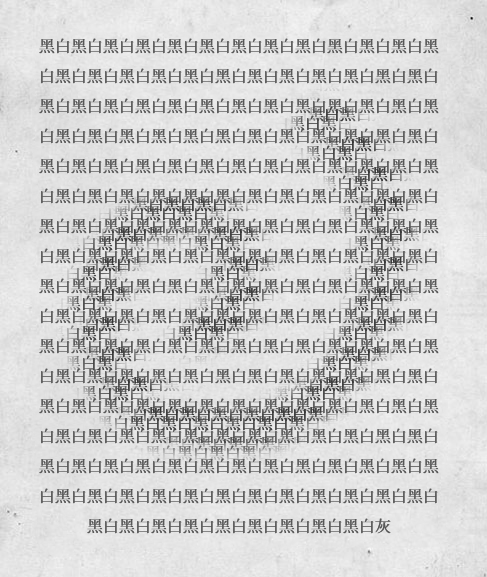
<style>
.page{position:relative;width:487px;height:577px}
.page>*{position:absolute;margin:0}
.t1{font:16px/30px "ContainmentBreach-Regular";color:#575757}
</style>
<div class="page">
<p class="t1" style="left:39px;top:38px;width:400px;height:496px;text-align:center">黑白黑白黑白黑白黑白黑白黑白黑白黑白黑白黑白黑白黑<br>白黑白黑白黑白黑白黑白黑白黑白黑白黑白黑白黑白黑白<br>黑白黑白黑白黑白黑白黑白黑白黑白黑白黑白黑白黑白黑<br>白黑白黑白黑白黑白黑白黑白黑白黑白黑白黑白黑白黑白<br>黑白黑白黑白黑白黑白黑白黑白黑白黑白黑白黑白黑白黑<br>白黑白黑白黑白黑白黑白黑白黑白黑白黑白黑白黑白黑白<br>黑白黑白黑白黑白黑白黑白黑白黑白黑白黑白黑白黑白黑<br>白黑白黑白黑白黑白黑白黑白黑白黑白黑白黑白黑白黑白<br>黑白黑白黑白黑白黑白黑白黑白黑白黑白黑白黑白黑白黑<br>白黑白黑白黑白黑白黑白黑白黑白黑白黑白黑白黑白黑白<br>黑白黑白黑白黑白黑白黑白黑白黑白黑白黑白黑白黑白黑<br>白黑白黑白黑白黑白黑白黑白黑白黑白黑白黑白黑白黑白<br>黑白黑白黑白黑白黑白黑白黑白黑白黑白黑白黑白黑白黑<br>白黑白黑白黑白黑白黑白黑白黑白黑白黑白黑白黑白黑白<br>黑白黑白黑白黑白黑白黑白黑白黑白黑白黑白黑白黑白黑<br>白黑白黑白黑白黑白黑白黑白黑白黑白黑白黑白黑白黑白<br>黑白黑白黑白黑白黑白黑白黑白黑白黑白灰</p>
</div>
